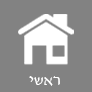
<style>
.page{position:relative;width:92px;height:92px;background:#828282}
.page>*{position:absolute;margin:0}
.t1{font:16px "David";color:#ffffff}
</style>
<div class="page">
<p class="t1" style="left:29px;top:76px;width:31px;height:10px">ישאר</p>
</div>
